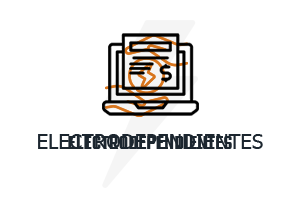
<style>
.page{position:relative;width:300px;height:200px;background:#ffffff}
.page>*{position:absolute;margin:0}
.t1{font:20px "Tahoma";letter-spacing:0.01em;color:#1c262f;text-transform:uppercase}
.t2{font:20px "Teko-SemiBold";letter-spacing:0.01em;color:#1c262f;text-transform:uppercase}
</style>
<div class="page">
<p class="t1" style="left:38px;top:134px;width:225px;height:15px">ELECTRODEPENDIENTES</p>
<p class="t2" style="left:68px;top:136px;width:164px;height:13px">ELECTRODEPENDIENTES</p>
</div>
